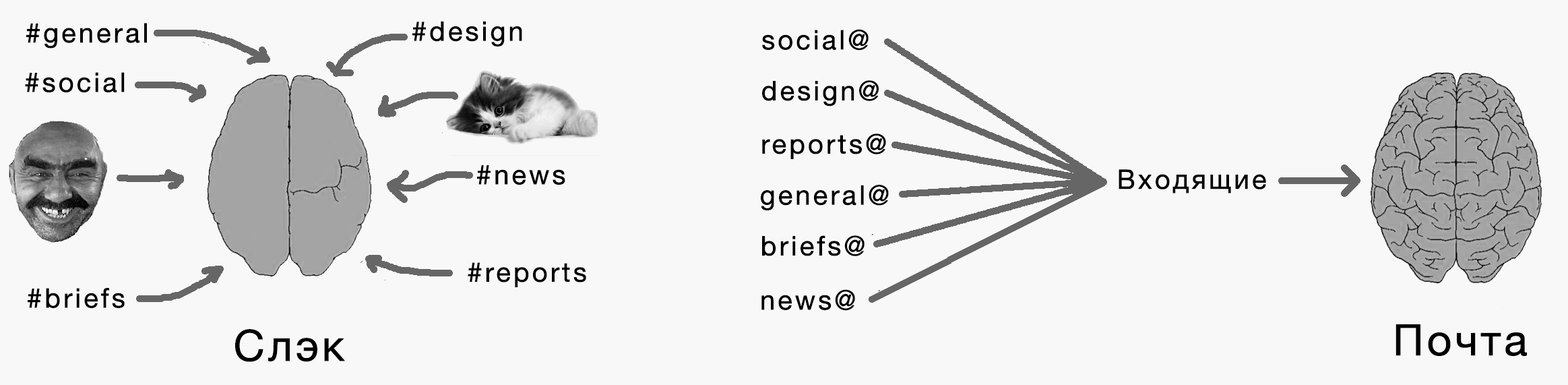
<style>
.page{position:relative;width:1568px;height:385px;background:#f8f8f8}
.page>*{position:absolute;margin:0}
.t1{font:27px "HelveticaNeue";letter-spacing:0.075em;color:#000000;font-weight:bold}
.t2{font:43.1px "HelveticaNeue";letter-spacing:0.05em;color:#000000;font-weight:bold}
</style>
<div class="page">
<p class="t1" style="left:26px;top:23px;width:121px;height:26px">#general</p>
<p class="t1" style="left:412px;top:21px;width:110px;height:25px">#design</p>
<p class="t1" style="left:762px;top:29px;width:107px;height:22px">social@</p>
<p class="t1" style="left:25px;top:72px;width:100px;height:20px">#social</p>
<p class="t1" style="left:762px;top:80px;width:117px;height:26px">design@</p>
<p class="t1" style="left:762px;top:133px;width:124px;height:26px">reports@</p>
<p class="t1" style="left:477px;top:165px;width:88px;height:20px">#news</p>
<p class="t1" style="left:1119px;top:169px;width:147px;height:24px">Входящие</p>
<p class="t1" style="left:761px;top:185px;width:128px;height:25px">general@</p>
<p class="t1" style="left:762px;top:235px;width:103px;height:21px">briefs@</p>
<p class="t1" style="left:468px;top:262px;width:118px;height:25px">#reports</p>
<p class="t1" style="left:28px;top:288px;width:97px;height:20px">#briefs</p>
<p class="t1" style="left:761px;top:289px;width:94px;height:22px">news@</p>
<p class="t2" style="left:235px;top:329px;width:110px;height:33px">Слэк</p>
<p class="t2" style="left:1395px;top:324px;width:132px;height:32px">Почта</p>
</div>
